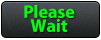
<style>
.page{position:relative;width:101px;height:40px}
.page>*{position:absolute;margin:0}
.t1{font:18px "MyriadPro-Bold";color:#01fe0d}
</style>
<div class="page">
<p class="t1" style="left:24px;top:5px;width:51px;height:27px">Please Wait</p>
</div>
